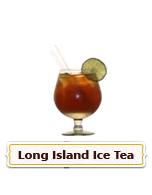
<style>
.page{position:relative;width:152px;height:195px;background:#ffffff}
.page>*{position:absolute;margin:0}
.t1{font:11.4px "Humanist777BT-BlackB";color:#3a0f07;scale:1.05 1}
</style>
<div class="page">
<p class="t1" style="left:18px;top:150px;width:116px;height:11px">Long Island Ice Tea</p>
</div>
